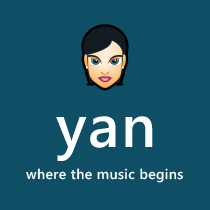
<style>
.page{position:relative;width:210px;height:210px;background:#0f4f65}
.page>*{position:absolute;margin:0}
.t1{font:60px "SegoeWP-Semibold";letter-spacing:0.025em;color:#ffffff}
.t2{font:14px "SegoeWP-Semibold";letter-spacing:0.025em;color:#fefefe}
</style>
<div class="page">
<p class="t1" style="left:56px;top:116px;width:97px;height:45px">yan</p>
<p class="t2" style="left:26px;top:168px;width:157px;height:15px">where the music begins</p>
</div>
